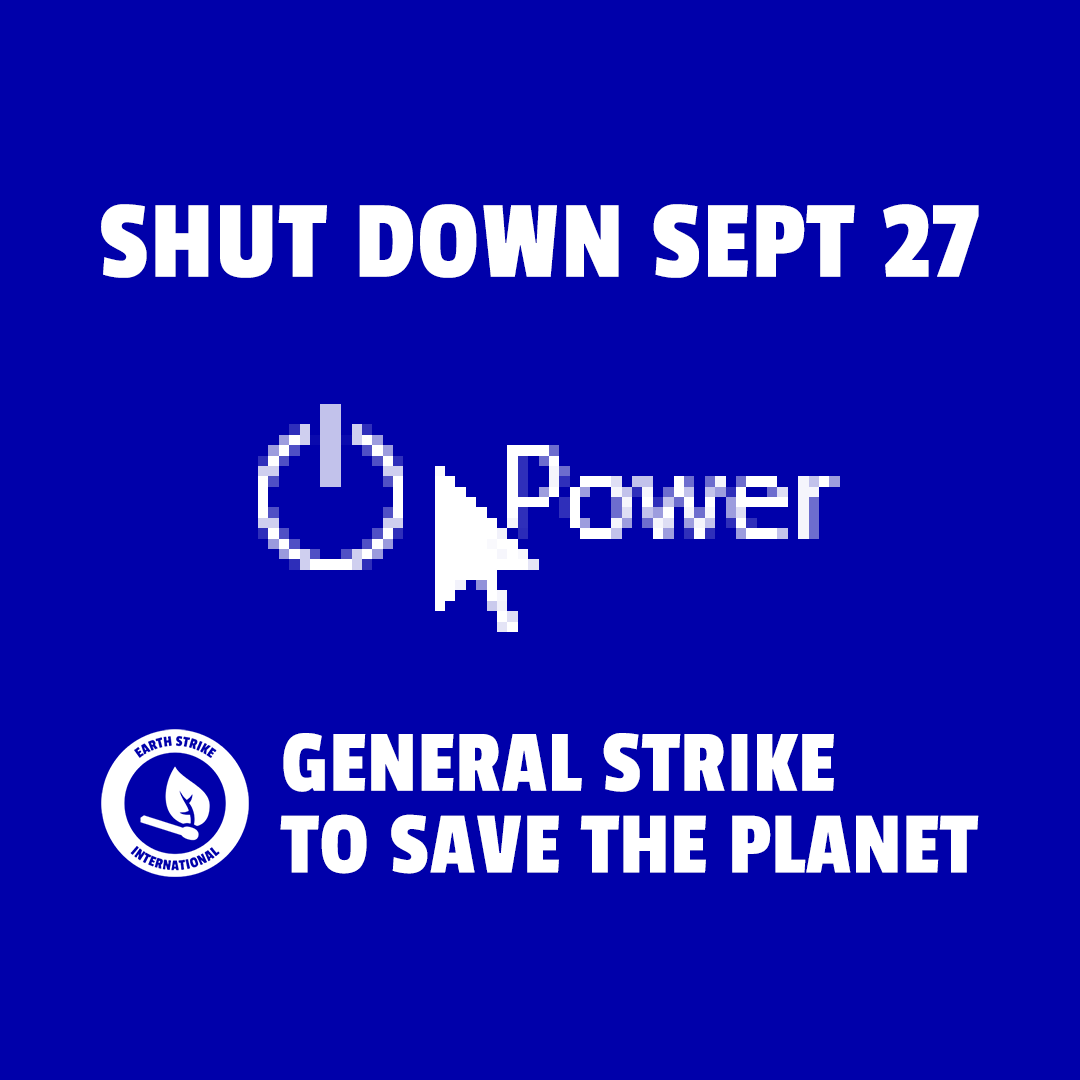
<style>
.page{position:relative;width:1080px;height:1080px;background:#0000aa}
.page>*{position:absolute;margin:0}
.t1{font:114.4px "PassionOne-Regular";letter-spacing:0.02em;color:#ffffff;text-transform:uppercase}
.t2{font:91.6px/81.7px "PassionOne-Regular";letter-spacing:0.01em;color:#ffffff}
</style>
<div class="page">
<p class="t1" style="left:101px;top:204px;width:878px;height:74px">shut down sept 27</p>
<p class="t2" style="left:280px;top:733px;width:699px;height:141px">GENERAL STRIKE<br>TO SAVE THE PLANET</p>
</div>
